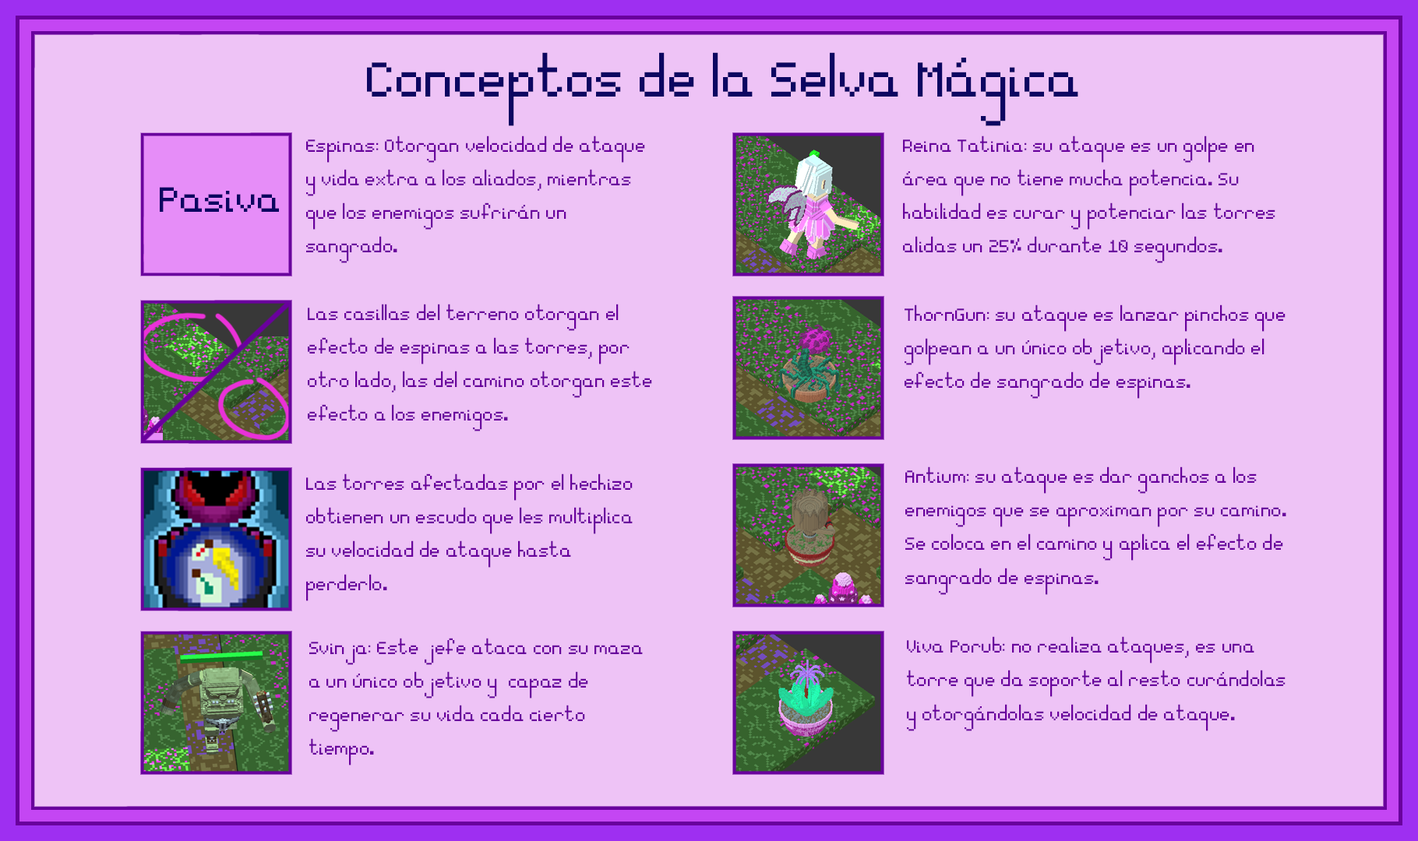
<style>
.page{position:relative;width:1418px;height:841px;background:#eec3f6}
.page>*{position:absolute;margin:0}
.t1{font:77.9px "Essential";color:#0c0661}
.t2{font:28px "Essential";color:#69009d}
.t3{font:56.1px "Essential";color:#0c0661}
</style>
<div class="page">
<p class="t1" style="left:367px;top:52px;width:711px;height:74px">Conceptos de la Selva Mágica</p>
<p class="t2" style="left:306px;top:136px;width:339px;height:127px">Espinas: Otorgan velocidad de ataque<br>y vida extra a los aliados, mientras<br>que los enemigos sufrirán un <br>sangrado.</p>
<p class="t2" style="left:903px;top:136px;width:372px;height:127px">Reina Tatinia: su ataque es un golpe en<br>área que no tiene mucha potencia. Su<br>habilidad es curar y potenciar las torres<br>alidas un 25% durante 10 segundos.</p>
<p class="t3" style="left:160px;top:187px;width:119px;height:25px">Pasiva</p>
<p class="t2" style="left:308px;top:304px;width:344px;height:127px">Las casillas del terreno otorgan el<br>efecto de espinas a las torres, por<br>otro lado, las del camino otorgan este<br>efecto a los enemigos.</p>
<p class="t2" style="left:904px;top:305px;width:381px;height:94px">ThornGun: su ataque es lanzar pinchos que <br>golpean a un único objetivo, aplicando el <br>efecto de sangrado de espinas.</p>
<p class="t2" style="left:306px;top:474px;width:326px;height:127px">Las torres afectadas por el hechizo<br>obtienen un escudo que les multiplica <br>su velocidad de ataque hasta <br>perderlo.</p>
<p class="t2" style="left:905px;top:467px;width:381px;height:128px">Antium: su ataque es dar ganchos a los<br>enemigos que se aproximan por su camino.<br>Se coloca en el camino y aplica el efecto de<br>sangrado de espinas.</p>
<p class="t2" style="left:309px;top:638px;width:334px;height:128px">Svinja: Este jefe ataca con su maza  <br>a un único objetivo y  capaz de <br>regenerar su vida cada cierto<br>tiempo.</p>
<p class="t2" style="left:907px;top:636px;width:378px;height:95px">Viva Porub: no realiza ataques, es una <br>torre que da soporte al resto curándolas<br>y otorgándolas velocidad de ataque.</p>
</div>
